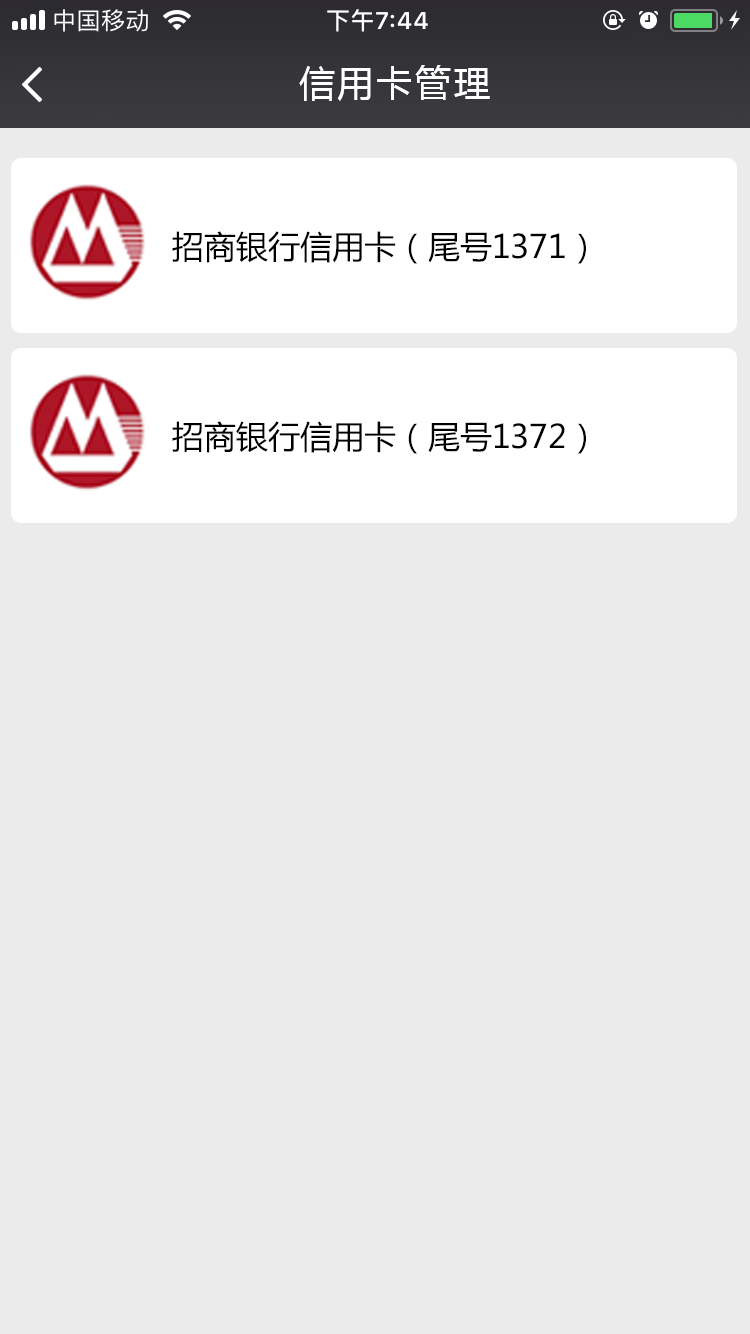
<style>
.page{position:relative;width:750px;height:1334px;background:#ebebeb}
.page>*{position:absolute;margin:0}
.t1{font:36px "MicrosoftYaHei";letter-spacing:0.08em;color:#ffffff}
.t2{font:32px "MicrosoftYaHei";color:#000000}
</style>
<div class="page">
<p class="t1" style="left:299px;top:65px;width:191px;height:36px">信用卡管理</p>
<p class="t2" style="left:172px;top:231px;width:414px;height:33px">招商银行信用卡（尾号1371）</p>
<p class="t2" style="left:172px;top:421px;width:414px;height:33px">招商银行信用卡（尾号1372）</p>
</div>
